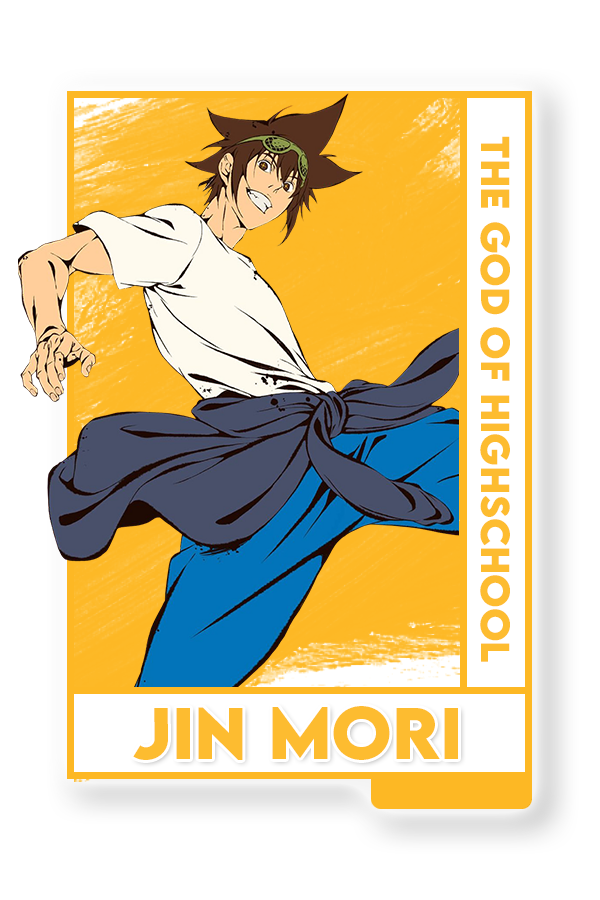
<style>
.page{position:relative;width:600px;height:900px;background:#ffffff}
.page>*{position:absolute;margin:0}
.t1{font:36px "LEMONMILK-Bold";color:#fdbc30}
.t2{font:65.2px "LEMONMILK-Bold";color:#fdbc30}
</style>
<div class="page">
<p class="t1" style="left:480px;top:136px;width:30px;height:526px;rotate:90deg">the god of highschool</p>
<p class="t2" style="left:133px;top:706px;width:325px;height:54px">jIn mORI</p>
</div>
